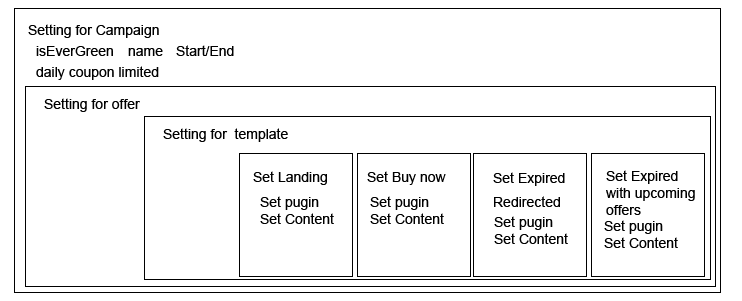
<style>
.page{position:relative;width:742px;height:301px;background:#ffffff}
.page>*{position:absolute;margin:0}
.t1{font:14px "ArialMT";color:#000000}
</style>
<div class="page">
<p class="t1" style="left:28px;top:24px;width:131px;height:14px">Setting for Campaign</p>
<p class="t1" style="left:36px;top:46px;width:77px;height:10px">isEverGreen</p>
<p class="t1" style="left:128px;top:48px;width:35px;height:8px">name</p>
<p class="t1" style="left:176px;top:45px;width:58px;height:11px">Start/End</p>
<p class="t1" style="left:36px;top:66px;width:123px;height:14px">daily coupon limited</p>
<p class="t1" style="left:44px;top:98px;width:96px;height:14px">Setting for offer</p>
<p class="t1" style="left:163px;top:128px;width:125px;height:14px">Setting for  template</p>
<p class="t1" style="left:253px;top:171px;width:74px;height:14px">Set Landing</p>
<p class="t1" style="left:367px;top:171px;width:79px;height:14px">Set Buy now</p>
<p class="t1" style="left:493px;top:172px;width:72px;height:14px">Set Expired</p>
<p class="t1" style="left:606px;top:170px;width:89px;height:45px">Set Expired <br>with upcoming<br>offers</p>
<p class="t1" style="left:260px;top:196px;width:74px;height:28px">Set pugin<br>Set Content</p>
<p class="t1" style="left:370px;top:196px;width:74px;height:28px">Set pugin<br>Set Content</p>
<p class="t1" style="left:494px;top:196px;width:66px;height:11px">Redirected</p>
<p class="t1" style="left:494px;top:216px;width:74px;height:28px">Set pugin<br>Set Content</p>
<p class="t1" style="left:604px;top:220px;width:74px;height:28px">Set pugin<br>Set Content</p>
</div>
